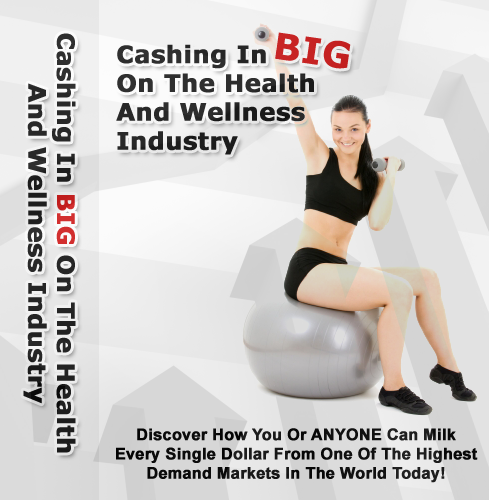
<style>
.page{position:relative;width:489px;height:500px}
.page>*{position:absolute;margin:0}
.t1{font:24px "Verdana-Bold";color:#272626;font-weight:bold}
.t2{font:36px "Verdana-Bold";color:#c62323;font-weight:bold}
.t3{font:24px "Verdana-Bold";color:#282828;font-weight:bold}
.t4{font:16px "Arial-BoldMT";color:#000000;font-weight:bold}
</style>
<div class="page">
<p class="t1" style="left:23px;top:33px;width:53px;height:420px;text-align:center;rotate:90deg">Cashing In BIG On The Health<br>And Wellness Industry</p>
<p class="t2" style="left:275px;top:32px;width:76px;height:37px;rotate:8deg">BIG</p>
<p class="t3" style="left:116px;top:44px;width:198px;height:111px">Cashing In<br>On The Health<br>And Wellness<br>Industry</p>
<p class="t4" style="left:116px;top:428px;width:362px;height:55px;text-align:center">Discover How You Or ANYONE Can Milk<br>Every Single Dollar From One Of The Highest<br>Demand Markets In The World Today!</p>
</div>
